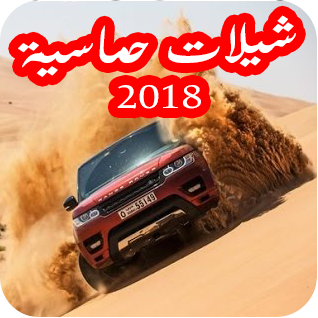
<style>
.page{position:relative;width:318px;height:318px}
.page>*{position:absolute;margin:0}
.t1{font:66px "UrduTypesetting";color:#ffffff;scale:1.19 1}
.t2{font:37px "UrduTypesetting";color:#ffffff;scale:1.19 1}
</style>
<div class="page">
<p class="t1" style="left:18px;top:15px;width:278px;height:94px;text-align:center">شيلات حماسية<br><span class="t2">2018</span></p>
</div>
